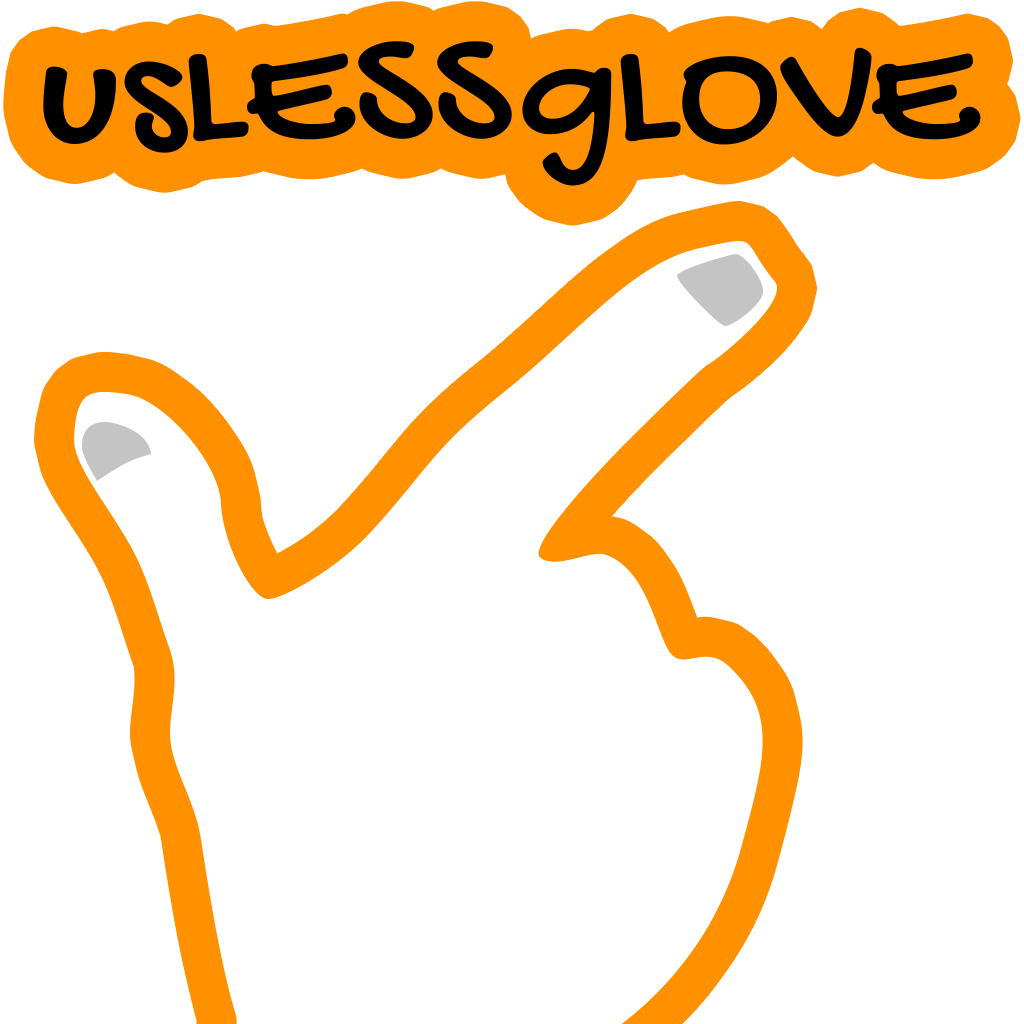
<style>
.page{position:relative;width:1024px;height:1024px;background:#ffffff}
.page>*{position:absolute;margin:0}
.t1{font:171.5px "GochiHandCyrillic";color:#000000}
</style>
<div class="page">
<p class="t1" style="left:43px;top:41px;width:938px;height:145px">usLESSgLOVE</p>
</div>
